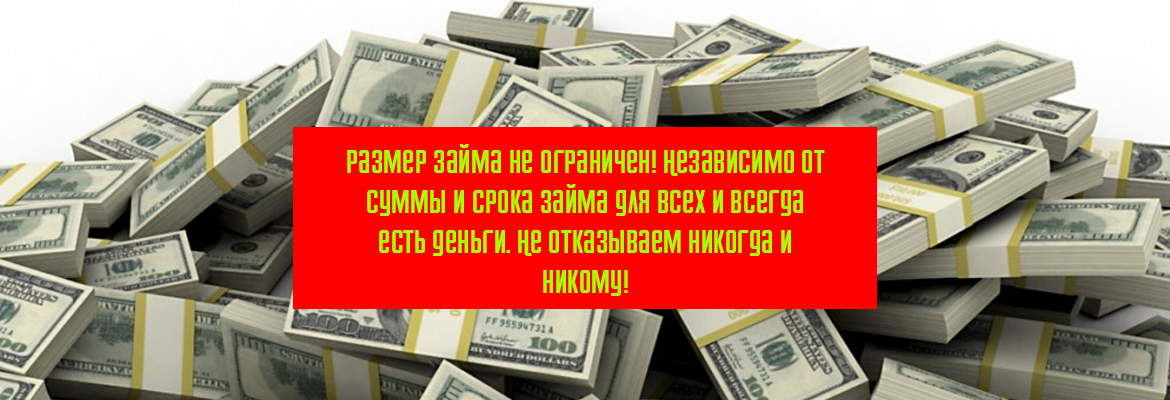
<style>
.page{position:relative;width:1170px;height:400px}
.page>*{position:absolute;margin:0}
.t1{font:33.3px "Airport";color:#a4ff06}
</style>
<div class="page">
<p class="t1" style="left:347px;top:144px;width:478px;height:152px;text-align:center">размер займа не ограничен! Независимо от суммы и срока займа для всех и всегда есть деньги. Не отказываем никогда и никому!</p>
</div>
